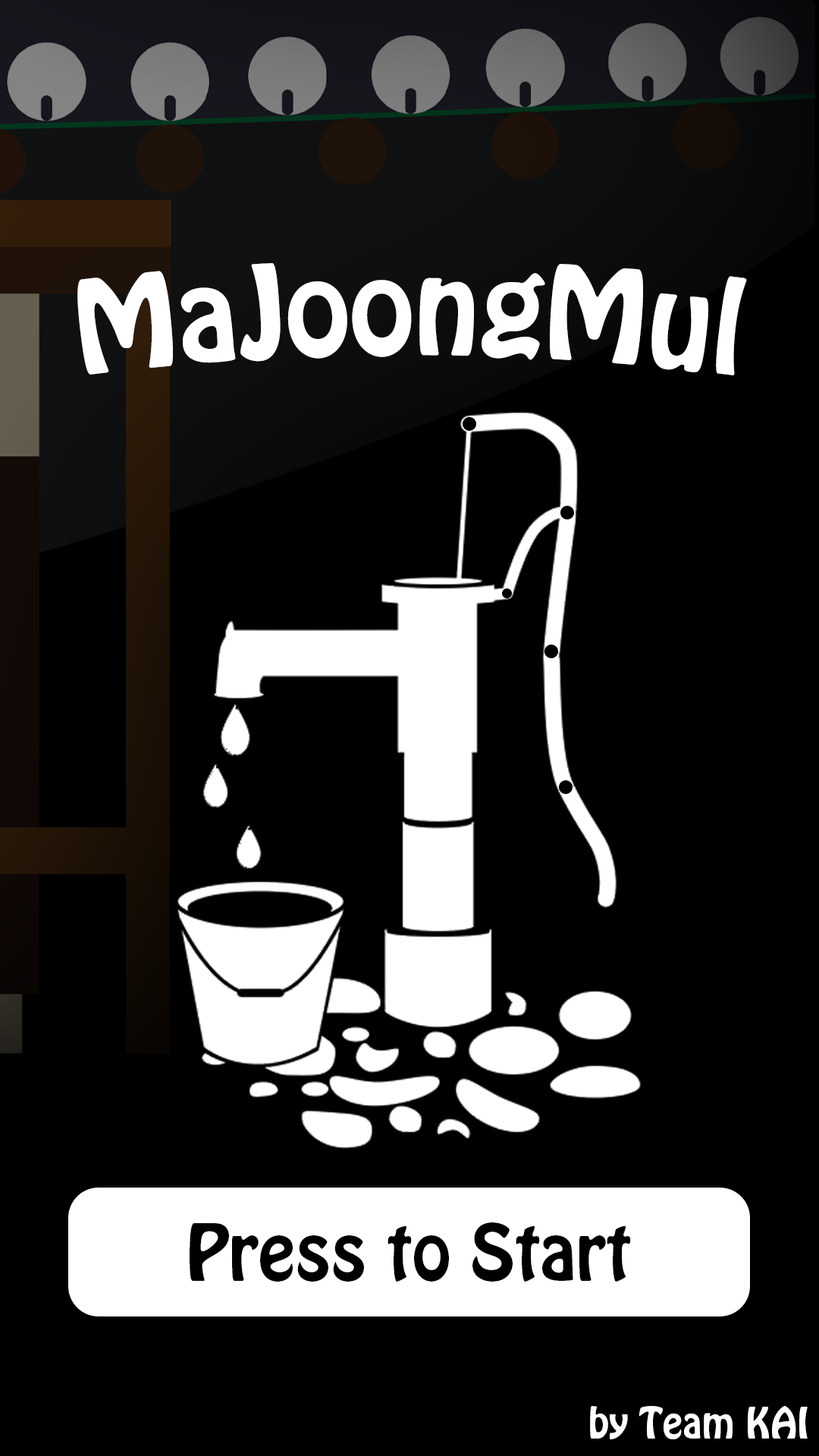
<style>
.page{position:relative;width:819px;height:1456px;background:#000000}
.page>*{position:absolute;margin:0}
.t1{font:114.5px "HoboStd";color:#ffffff}
.t2{font:69.5px "HoboStd";color:#000000}
.t3{font:37.9px "HoboStd";color:#ffffff}
</style>
<div class="page">
<p class="t1" style="left:77px;top:263px;width:670px;height:112px">MaJoongMul</p>
<p class="t2" style="left:190px;top:1222px;width:441px;height:60px">Press to Start</p>
<p class="t3" style="left:590px;top:1406px;width:218px;height:33px">by Team KAI</p>
</div>
